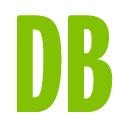
<style>
.page{position:relative;width:128px;height:128px;background:#ffffff}
.page>*{position:absolute;margin:0}
.t1{font:138px "YanoneKaffeesatz-Bold";color:#83c203}
</style>
<div class="page">
<p class="t1" style="left:17px;top:15px;width:96px;height:97px">DB</p>
</div>
